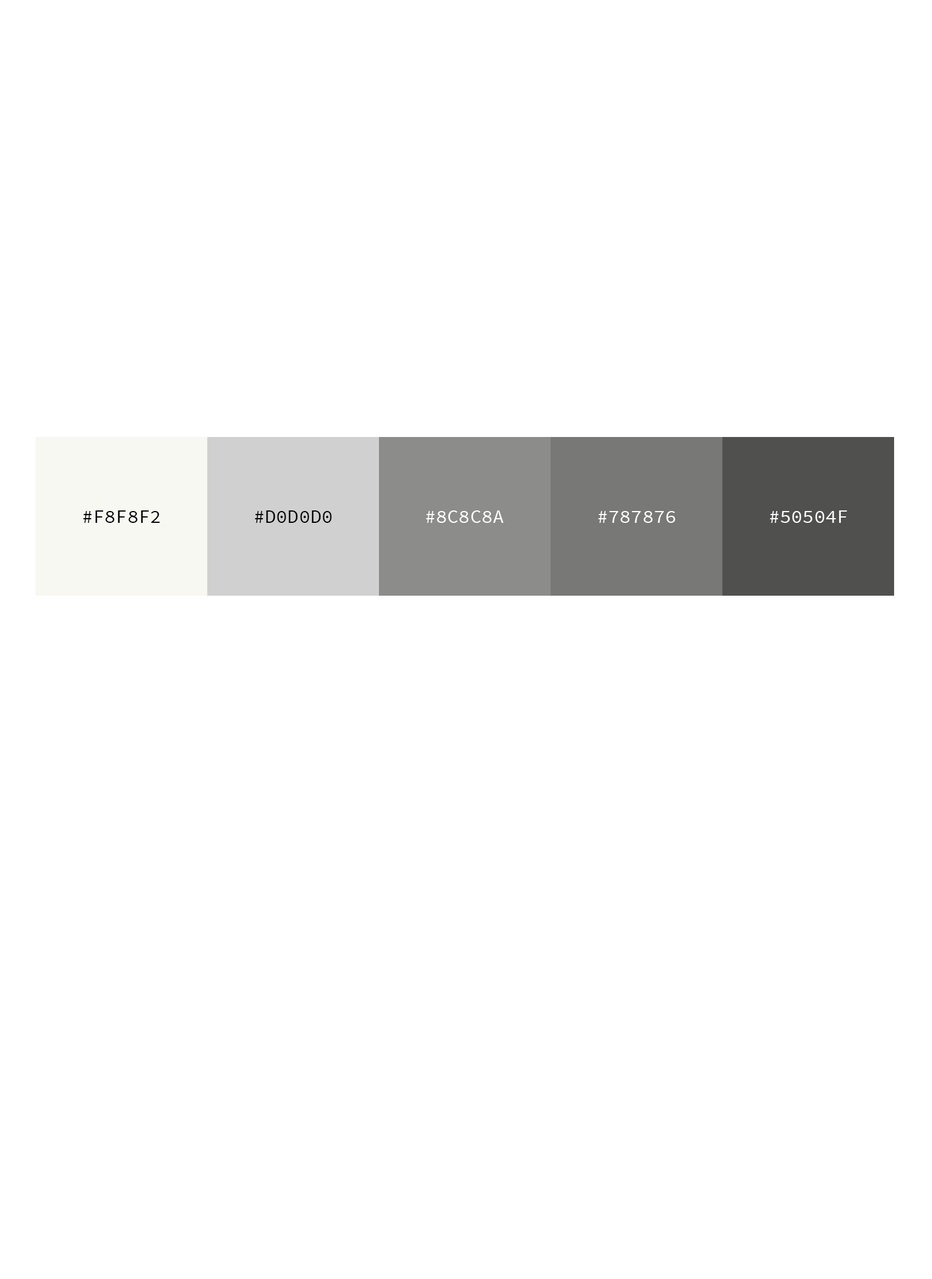
<style>
.page{position:relative;width:932px;height:1279px;background:#ffffff}
.page>*{position:absolute;margin:0}
.t1{font:19px "SourceCodePro-Regular";color:#000000;text-transform:uppercase}
.t2{font:19px "SourceCodePro-Regular";color:#ffffff;text-transform:uppercase}
</style>
<div class="page">
<p class="t1" style="left:83px;top:510px;width:77px;height:13px">#f8f8f2</p>
<p class="t1" style="left:255px;top:510px;width:77px;height:13px">#d0d0d0</p>
<p class="t2" style="left:426px;top:510px;width:78px;height:13px">#8c8c8a</p>
<p class="t2" style="left:598px;top:511px;width:78px;height:12px">#787876</p>
<p class="t2" style="left:770px;top:510px;width:77px;height:13px">#50504F</p>
</div>
